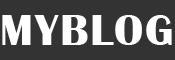
<style>
.page{position:relative;width:175px;height:60px;background:#333333}
.page>*{position:absolute;margin:0}
.t1{font:45px "BritannicBold";letter-spacing:0.04em;color:#ffffff}
</style>
<div class="page">
<p class="t1" style="left:2px;top:15px;width:170px;height:30px">MYBLOG</p>
</div>
